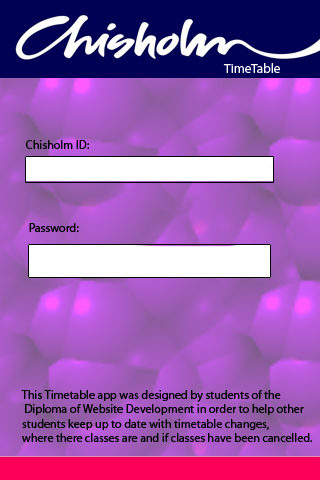
<style>
.page{position:relative;width:320px;height:480px}
.page>*{position:absolute;margin:0}
.t1{font:13.3px "MyriadPro-Regular";color:#ffffff}
.t2{font:12px "MyriadPro-Regular";color:#000000}
</style>
<div class="page">
<p class="t1" style="left:223px;top:63px;width:57px;height:10px">TimeTable</p>
<p class="t2" style="left:29px;top:223px;width:50px;height:9px">Password:</p>
<p class="t2" style="left:21px;top:390px;width:291px;height:52px">This Timetable app was designed by students of the<br> Diploma of Website Development in order to help other <br>students keep up to date with timetable changes, <br>where there classes are and if classes have been cancelled.</p>
</div>
